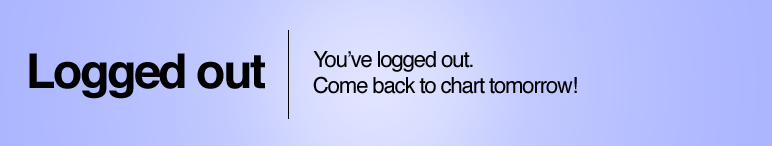
<style>
.page{position:relative;width:772px;height:146px}
.page>*{position:absolute;margin:0}
.t1{font:48px "Helvetica-Bold";letter-spacing:-0.05em;color:#000000}
.t2{font:22px "Helvetica";letter-spacing:-0.05em;color:#000000}
</style>
<div class="page">
<p class="t1" style="left:29px;top:53px;width:236px;height:46px">Logged out</p>
<p class="t2" style="left:313px;top:51px;width:264px;height:43px">You’ve logged out.<br>Come back to chart tomorrow!</p>
</div>
